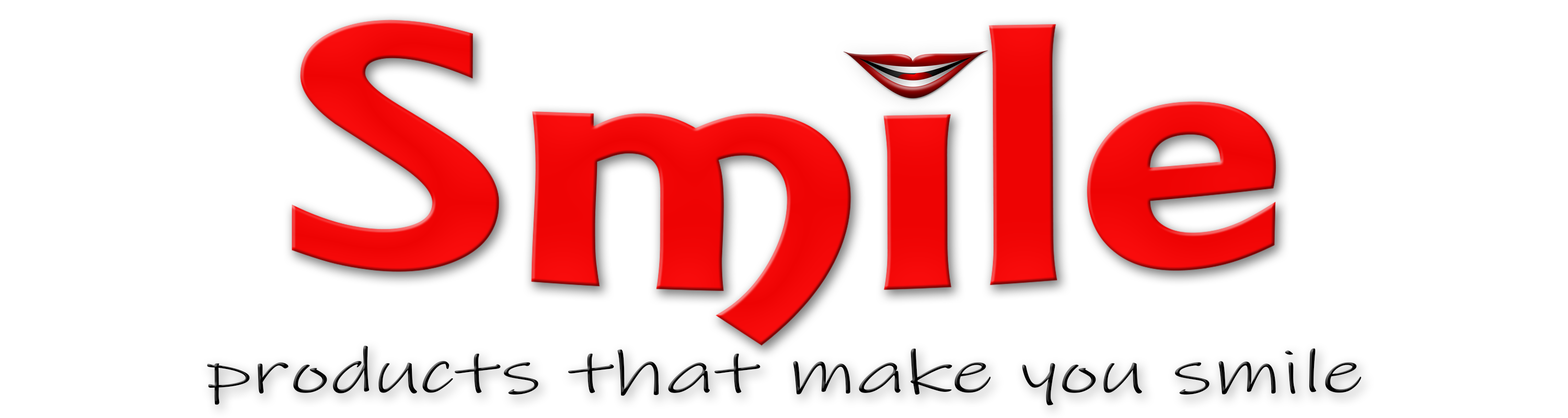
<style>
.page{position:relative;width:1568px;height:418px;background:#ffffff}
.page>*{position:absolute;margin:0}
.t1{font:61.7px "InkFree";color:#000000;scale:1.5 1}
</style>
<div class="page">
<p class="t1" style="left:207px;top:345px;width:1155px;height:61px">products that make you smile</p>
</div>
